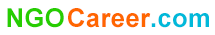
<style>
.page{position:relative;width:215px;height:35px;background:#ffffff}
.page>*{position:absolute;margin:0}
.t1{font:26.3px "Arial-BoldMT";letter-spacing:0.01em;color:#27cd01}
.t2{font:26.3px "Arial-BoldMT";letter-spacing:0.01em;color:#ff6600}
.t3{font:26.3px "Arial-BoldMT";letter-spacing:0.01em;color:#00b9da}
</style>
<div class="page">
<p class="t1" style="left:7px;top:8px;width:57px;height:20px">NGO</p>
<p class="t2" style="left:68px;top:8px;width:83px;height:20px">Career</p>
<p class="t3" style="left:151px;top:13px;width:58px;height:15px">.com</p>
</div>
